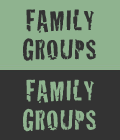
<style>
.page{position:relative;width:120px;height:140px;background:#333333}
.page>*{position:absolute;margin:0}
.t1{font:30px "Cracked";letter-spacing:0.025em;color:#333333}
.t2{font:30px "Cracked";letter-spacing:0.025em;color:#8fb38f}
</style>
<div class="page">
<p class="t1" style="left:26px;top:9px;width:68px;height:24px">FAMILY</p>
<p class="t1" style="left:23px;top:38px;width:73px;height:23px">GROUPS</p>
<p class="t2" style="left:26px;top:79px;width:68px;height:24px">FAMILY</p>
<p class="t2" style="left:23px;top:108px;width:73px;height:24px">GROUPS</p>
</div>
